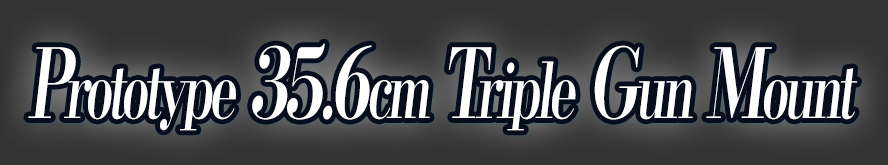
<style>
.page{position:relative;width:888px;height:165px}
.page>*{position:absolute;margin:0}
.t1{font:76.8px "KochoStd-Heavy";letter-spacing:-0.08em;color:#ffffff;font-style:italic;scale:0.66 1}
.t2{font:96px "KochoStd-Heavy";letter-spacing:-0.08em;color:#ffffff;font-style:italic;scale:0.66 1}
</style>
<div class="page">
<p class="t1" style="left:28px;top:43px;width:830px;height:88px"><span class="t2">P</span>rototype<span class="t2"> 35.6</span>cm<span class="t2"> T</span>riple<span class="t2"> G</span>un<span class="t2"> M</span>ount</p>
</div>
